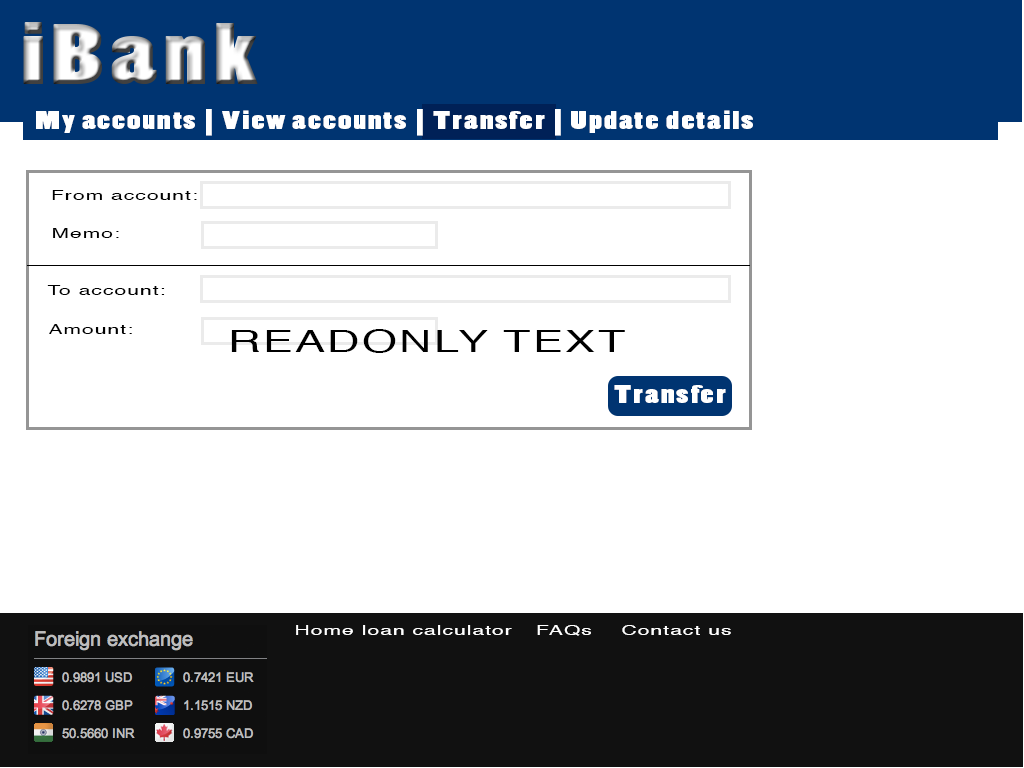
<style>
.page{position:relative;width:1024px;height:768px;background:#ffffff}
.page>*{position:absolute;margin:0}
.t1{font:24px "PoplarStd";letter-spacing:0.05em;color:#ffffff;scale:1.5 1}
.t2{font:14px "Helvetica";letter-spacing:0.05em;color:#000000;scale:1.5 1}
.t3{font:30px "Helvetica";letter-spacing:0.05em;color:#000000;scale:1.5 1}
.t4{font:14px "Helvetica";letter-spacing:0.05em;color:#ffffff;scale:1.5 1}
</style>
<div class="page">
<p class="t1" style="left:36px;top:109px;width:717px;height:27px">My accounts | View accounts | Transfer | Update details</p>
<p class="t2" style="left:52px;top:190px;width:145px;height:10px">From account:</p>
<p class="t2" style="left:53px;top:228px;width:66px;height:10px">Memo:</p>
<p class="t2" style="left:47px;top:285px;width:118px;height:10px">To account:</p>
<p class="t2" style="left:49px;top:324px;width:83px;height:10px">Amount:</p>
<p class="t3" style="left:231px;top:329px;width:394px;height:24px">READONLY TEXT</p>
<p class="t1" style="left:614px;top:385px;width:112px;height:18px">Transfer</p>
<p class="t4" style="left:296px;top:625px;width:216px;height:10px">Home loan calculator</p>
<p class="t4" style="left:537px;top:625px;width:54px;height:11px">FAQs</p>
<p class="t4" style="left:622px;top:625px;width:109px;height:10px">Contact us</p>
</div>
